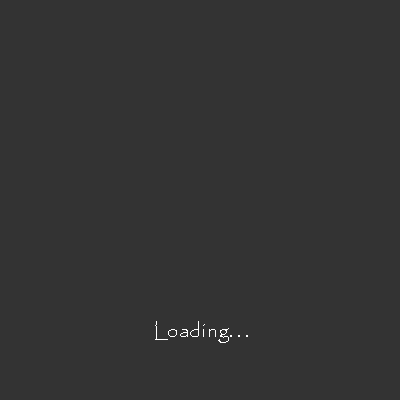
<style>
.page{position:relative;width:400px;height:400px;background:#333333}
.page>*{position:absolute;margin:0}
.t1{font:20px "Papyrus-Regular";color:#ffffff}
</style>
<div class="page">
<p class="t1" style="left:155px;top:321px;width:93px;height:22px">Loading. . .</p>
</div>
